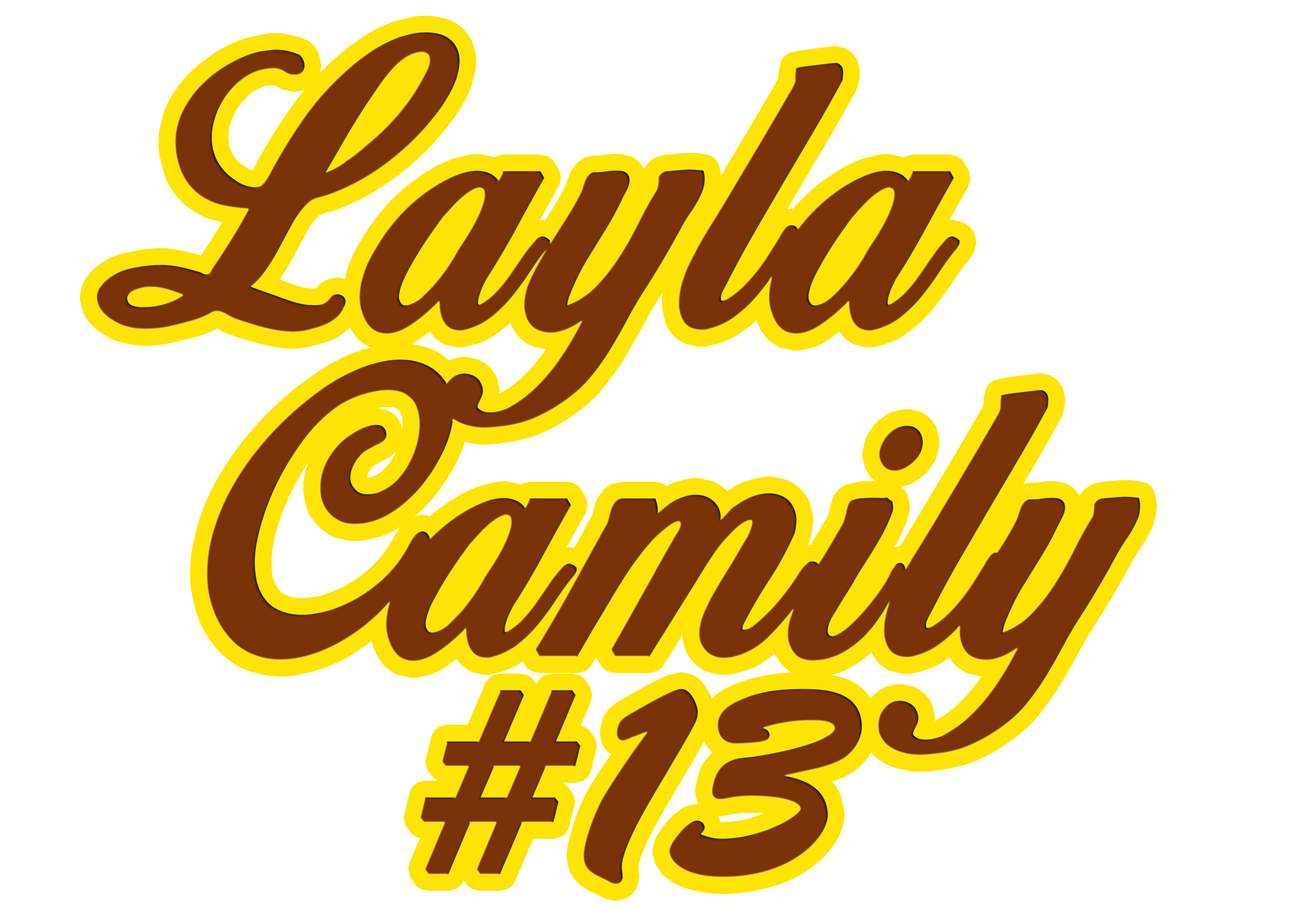
<style>
.page{position:relative;width:1299px;height:918px;background:#ffffff}
.page>*{position:absolute;margin:0}
.t1{font:342.3px/327px "BirdsofParadise-PersonaluseOnly";letter-spacing:0.035em;color:#7a3208;font-weight:bold}
.t2{font:277.2px/219.1px "BrushScriptStd";letter-spacing:-0.1em;color:#7a3208;font-weight:bold}
</style>
<div class="page">
<p class="t1" style="left:96px;top:32px;width:1044px;height:852px;text-align:center">Layla <br> Camily<br> <span class="t2">#13</span></p>
</div>
